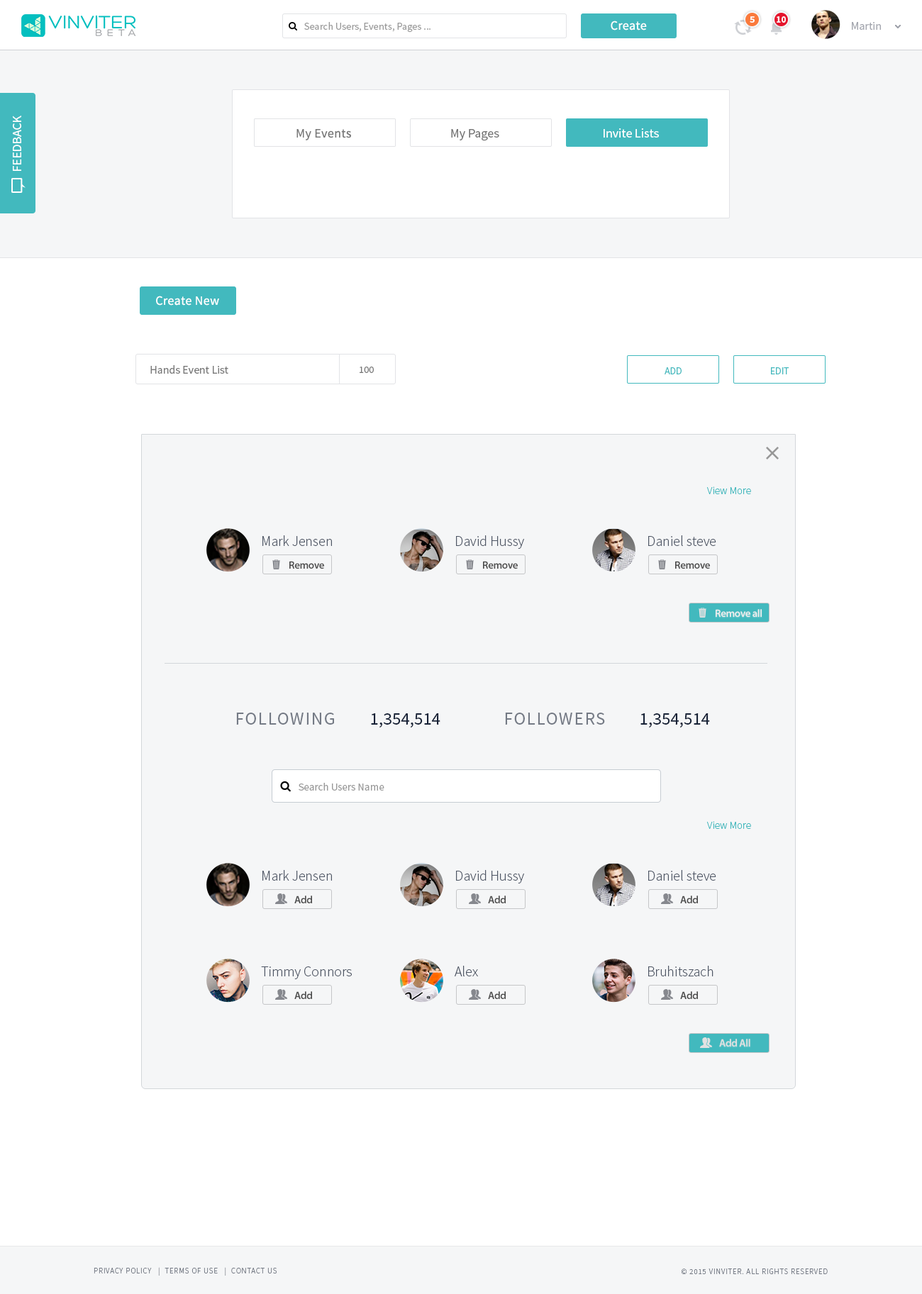
<style>
.page{position:relative;width:922px;height:1294px;background:#ffffff}
.page>*{position:absolute;margin:0}
.t1{font:9.2px "SourceSansPro-Bold";color:#ffffff}
.t2{font:10.2px "SourceSansPro-Regular";color:#999999}
.t3{font:12.8px "SourceSansPro-Regular";letter-spacing:0.02em;color:#ffffff}
.t4{font:11.3px "SourceSansPro-Regular";color:#a3a6ae}
.t5{font:12.8px "SourceSansPro-Regular";color:#ffffff}
.t6{font:12.8px "SourceSansPro-Regular";letter-spacing:0.02em;color:#767676}
.t7{font:12.8px "SourceSansPro-Regular";color:#767676}
.t8{font:11.3px "SourceSansPro-Regular";color:#767676}
.t9{font:9.9px "SourceSansPro-Regular";color:#767676}
.t10{font:9.9px "SourceSansPro-Regular";color:#42b9be}
.t11{font:10.6px "SourceSansPro-Light";color:#42b9be}
.t12{font:14.2px "SourceSansPro-Light";color:#4e5665}
.t13{font:10.6px "MyriadPro-Semibold";letter-spacing:-0.025em;color:#4b4b4b}
.t14{font:10.6px "MyriadPro-Semibold";letter-spacing:-0.025em;color:#eeeeee}
.t15{font:17.7px "SourceSansPro-Regular";letter-spacing:0.075em;color:#747a85;text-transform:uppercase}
.t16{font:17.7px "SourceSansPro-Regular";color:#162136}
.t17{font:10.6px "SourceSansPro-Regular";color:#999999}
.t18{font:10.6px "MyriadPro-Semibold";letter-spacing:-0.025em;color:#e1e1e1}
.t19{font:7.8px "SourceSansPro-Light";letter-spacing:0.075em;color:#747a85;text-transform:uppercase}
</style>
<div class="page">
<p class="t1" style="left:749px;top:16px;width:5px;height:7px">5</p>
<p class="t1" style="left:776px;top:16px;width:10px;height:7px">10</p>
<p class="t2" style="left:304px;top:22px;width:126px;height:11px">Search Users, Events, Pages ...</p>
<p class="t3" style="left:610px;top:21px;width:37px;height:9px">Create</p>
<p class="t4" style="left:851px;top:22px;width:30px;height:8px">Martin</p>
<p class="t5" style="left:13px;top:116px;width:8px;height:55px;rotate:-90deg">FEEDBACK</p>
<p class="t6" style="left:296px;top:129px;width:55px;height:11px">My Events</p>
<p class="t7" style="left:451px;top:129px;width:48px;height:12px">My Pages</p>
<p class="t5" style="left:603px;top:128px;width:56px;height:10px">Invite Lists</p>
<p class="t3" style="left:156px;top:296px;width:63px;height:10px">Create New</p>
<p class="t8" style="left:150px;top:365px;width:78px;height:9px">Hands Event List</p>
<p class="t9" style="left:359px;top:367px;width:15px;height:6px">100</p>
<p class="t10" style="left:664px;top:367px;width:17px;height:7px">ADD</p>
<p class="t10" style="left:771px;top:367px;width:18px;height:7px">EDIT</p>
<p class="t11" style="left:707px;top:486px;width:44px;height:8px">View More</p>
<p class="t12" style="left:262px;top:535px;width:70px;height:11px">Mark Jensen</p>
<p class="t12" style="left:456px;top:535px;width:68px;height:14px">David Hussy</p>
<p class="t12" style="left:648px;top:535px;width:68px;height:11px">Daniel steve</p>
<p class="t13" style="left:289px;top:561px;width:35px;height:8px">Remove</p>
<p class="t13" style="left:483px;top:561px;width:35px;height:8px">Remove</p>
<p class="t13" style="left:675px;top:561px;width:35px;height:8px">Remove</p>
<p class="t14" style="left:715px;top:609px;width:46px;height:8px">Remove all</p>
<p class="t15" style="left:236px;top:712px;width:98px;height:13px">following</p>
<p class="t16" style="left:371px;top:713px;width:69px;height:15px">1,354,514</p>
<p class="t15" style="left:505px;top:712px;width:100px;height:13px">followers</p>
<p class="t16" style="left:640px;top:713px;width:70px;height:15px">1,354,514</p>
<p class="t17" style="left:298px;top:783px;width:86px;height:7px">Search Users Name</p>
<p class="t11" style="left:707px;top:821px;width:44px;height:8px">View More</p>
<p class="t12" style="left:262px;top:870px;width:70px;height:11px">Mark Jensen</p>
<p class="t12" style="left:456px;top:870px;width:68px;height:13px">David Hussy</p>
<p class="t12" style="left:648px;top:870px;width:68px;height:11px">Daniel steve</p>
<p class="t13" style="left:294px;top:895px;width:18px;height:8px">Add</p>
<p class="t13" style="left:488px;top:895px;width:17px;height:8px">Add</p>
<p class="t13" style="left:680px;top:895px;width:18px;height:8px">Add</p>
<p class="t12" style="left:454px;top:966px;width:24px;height:10px">Alex</p>
<p class="t12" style="left:648px;top:966px;width:65px;height:10px">Bruhitszach</p>
<p class="t12" style="left:261px;top:966px;width:91px;height:13px">Timmy Connors</p>
<p class="t13" style="left:294px;top:991px;width:18px;height:8px">Add</p>
<p class="t13" style="left:488px;top:991px;width:17px;height:8px">Add</p>
<p class="t13" style="left:680px;top:991px;width:18px;height:8px">Add</p>
<p class="t18" style="left:719px;top:1039px;width:31px;height:7px">Add All</p>
<p class="t19" style="left:94px;top:1267px;width:183px;height:8px">Privacy Policy   |  Terms of Use   |  Contact us</p>
<p class="t19" style="left:681px;top:1268px;width:146px;height:6px">© 2015 VINVITER. All rights reserved</p>
</div>
